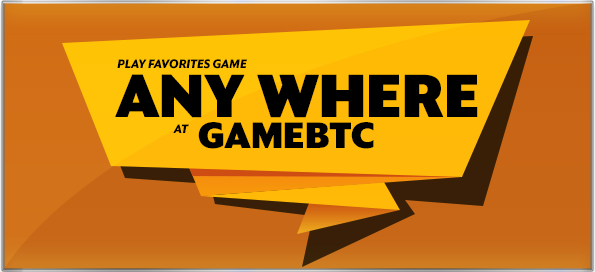
<style>
.page{position:relative;width:595px;height:272px}
.page>*{position:absolute;margin:0}
.t1{font:12px "SanomatSansVN-BoldItalic";color:#000100;text-transform:uppercase}
.t2{font:60px "SanomatSansVN-XBold";letter-spacing:0.01em;color:#000000;text-transform:uppercase}
.t3{font:36px "SanomatSansVN-XBold";letter-spacing:0.01em;color:#000000;text-transform:uppercase}
</style>
<div class="page">
<p class="t1" style="left:117px;top:59px;width:130px;height:10px">Play favorites game</p>
<p class="t2" style="left:115px;top:74px;width:363px;height:44px">ANY WHERE</p>
<p class="t1" style="left:173px;top:124px;width:16px;height:9px">at</p>
<p class="t3" style="left:198px;top:122px;width:176px;height:27px">GameBTC</p>
</div>
